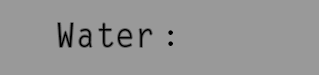
<style>
.page{position:relative;width:319px;height:75px;background:#999999}
.page>*{position:absolute;margin:0}
.t1{font:33px "LetterGothicStd";color:#000000}
</style>
<div class="page">
<p class="t1" style="left:58px;top:23px;width:94px;height:24px">Water</p>
<p class="t1" style="left:168px;top:30px;width:5px;height:16px">:</p>
</div>
